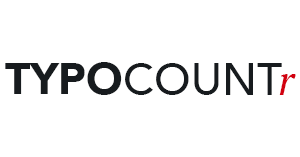
<style>
.page{position:relative;width:300px;height:157px;background:#ffffff}
.page>*{position:absolute;margin:0}
.t1{font:44px "Avenir-Black";color:#171b1e}
.t2{font:44px "Avenir-Medium";color:#171b1e}
.t3{font:41.5px "PTSerif-Italic";color:#d2000f}
</style>
<div class="page">
<p class="t1" style="left:5px;top:62px;width:117px;height:33px">TYPO</p>
<p class="t2" style="left:125px;top:63px;width:157px;height:32px">COUNT</p>
<p class="t3" style="left:279px;top:74px;width:17px;height:21px">r</p>
</div>
